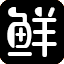
<style>
.page{position:relative;width:64px;height:64px;background:#000000}
.page>*{position:absolute;margin:0}
.t1{font:12px "MFKeKe_Noncommercial-Regular";color:#ffffff}
</style>
<div class="page">
<p class="t1" style="left:7px;top:7px;width:50px;height:50px">鲜</p>
</div>
